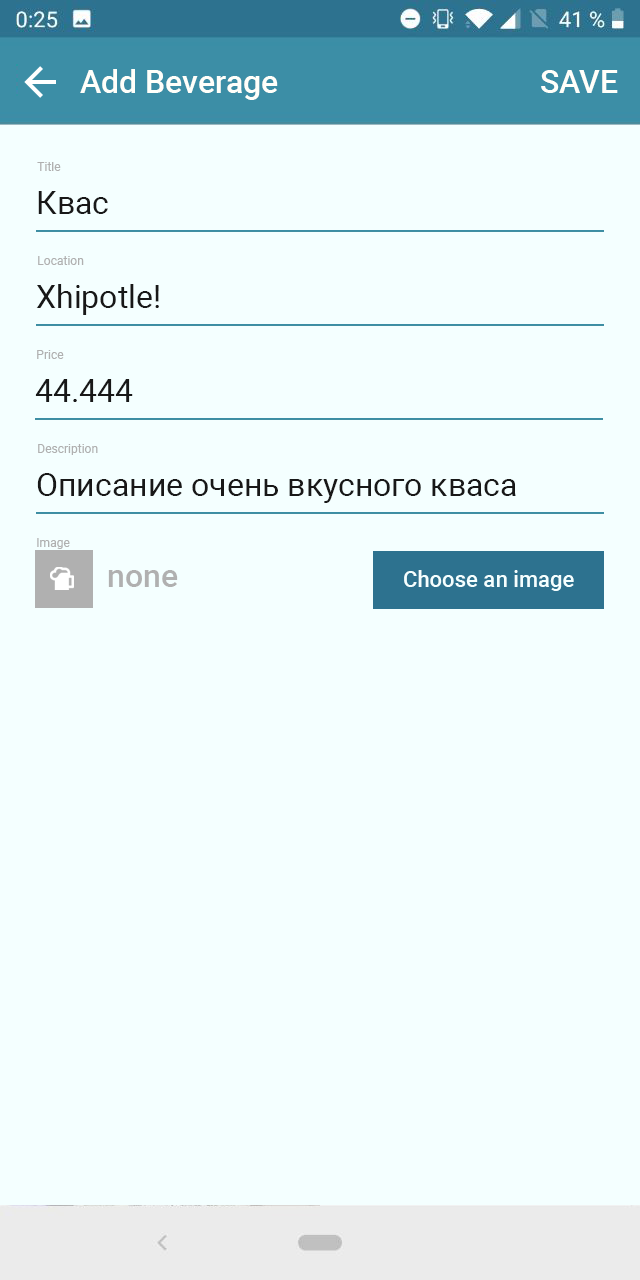
<style>
.page{position:relative;width:640px;height:1280px;background:#f4ffff}
.page>*{position:absolute;margin:0}
.t1{font:32px "Roboto-Medium";color:#fffffa}
.t2{font:12px "Roboto-Regular";color:#b0b0b0}
.t3{font:32px "Roboto-Regular";color:#181818}
.t4{font:32px "Roboto-Medium";color:#b0b0b0}
.t5{font:22px "Roboto-Medium";color:#f4ffff}
</style>
<div class="page">
<p class="t1" style="left:80px;top:69px;width:198px;height:31px">Add Beverage</p>
<p class="t1" style="left:541px;top:70px;width:77px;height:23px">SAVE</p>
<p class="t2" style="left:37px;top:162px;width:24px;height:9px">Title</p>
<p class="t3" style="left:38px;top:191px;width:70px;height:23px">Квас</p>
<p class="t2" style="left:38px;top:256px;width:46px;height:9px">Location</p>
<p class="t3" style="left:36px;top:284px;width:123px;height:31px">Xhipotle!</p>
<p class="t2" style="left:37px;top:350px;width:27px;height:9px">Price</p>
<p class="t3" style="left:35px;top:379px;width:98px;height:23px">44.444</p>
<p class="t2" style="left:38px;top:444px;width:60px;height:11px">Description</p>
<p class="t3" style="left:37px;top:473px;width:479px;height:30px">Описание очень вкусного кваса</p>
<p class="t2" style="left:37px;top:538px;width:33px;height:11px">Image</p>
<p class="t4" style="left:108px;top:570px;width:70px;height:17px">none</p>
<p class="t5" style="left:404px;top:570px;width:170px;height:21px">Choose an image</p>
</div>
